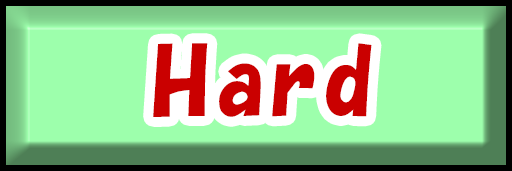
<style>
.page{position:relative;width:512px;height:171px;background:#9dffac}
.page>*{position:absolute;margin:0}
.t1{font:90px "HGPSoeiKakupoptai";letter-spacing:0.08em;color:#ca0000}
</style>
<div class="page">
<p class="t1" style="left:153px;top:43px;width:219px;height:74px">Hard</p>
</div>
